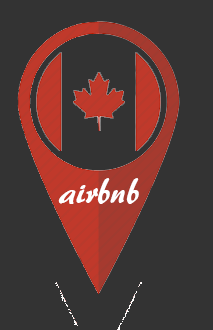
<style>
.page{position:relative;width:213px;height:330px;background:#333333}
.page>*{position:absolute;margin:0}
.t1{font:36px "ARBERKLEY";color:#ffffff}
</style>
<div class="page">
<p class="t1" style="left:58px;top:178px;width:81px;height:26px">airbnb</p>
</div>
